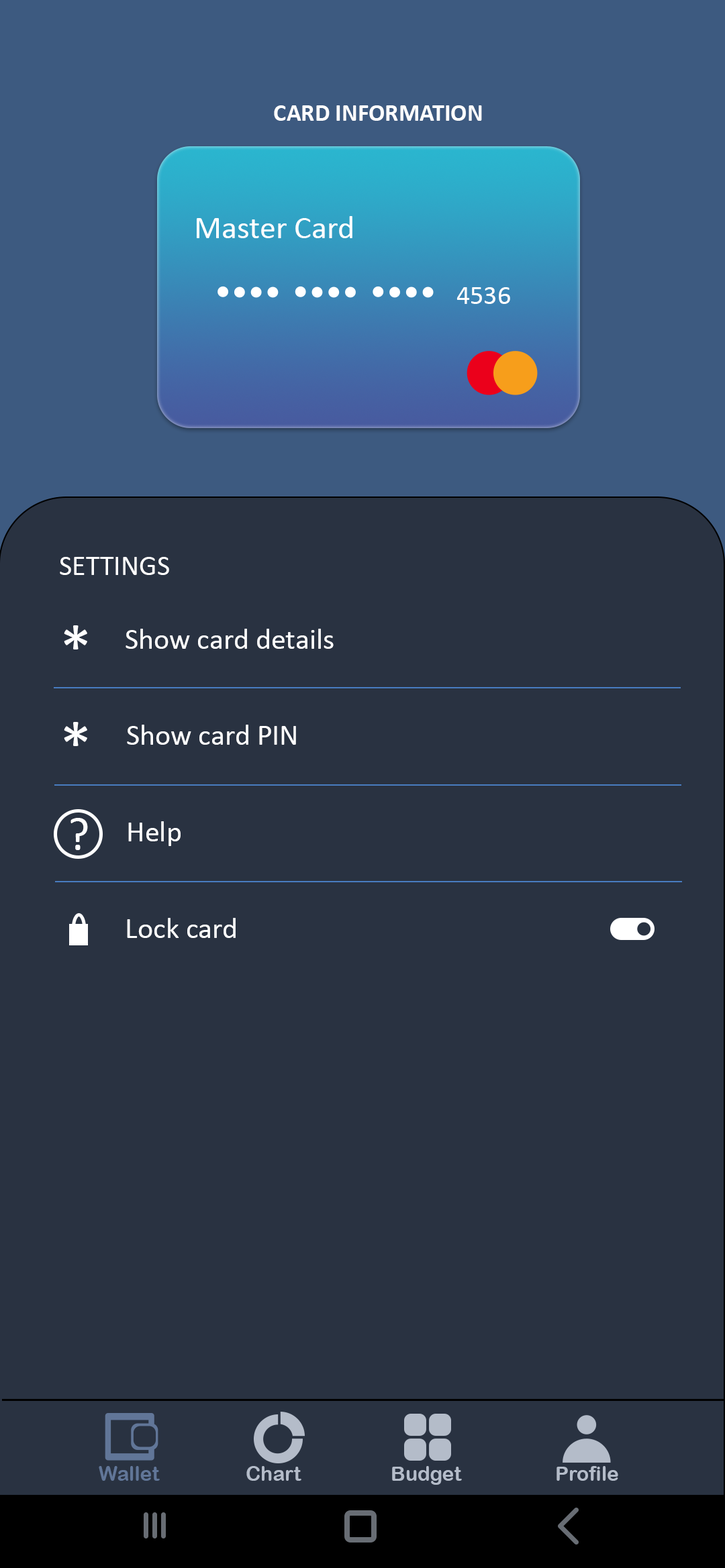
<style>
.page{position:relative;width:725px;height:1568px;background:#293241}
.page>*{position:absolute;margin:0}
.t1{font:24.2px "Calibri-Bold";color:#ffffff}
.t2{font:32.2px "Calibri";color:#ffffff}
.t3{font:26.8px "Calibri";color:#ffffff}
.t4{font:28.2px "Calibri";color:#ffffff}
.t5{font:67.1px "Calibri";color:#ffffff}
.t6{font:29.5px "Calibri";color:#ffffff}
.t7{font:46.8px "Calibri";color:#ffffff}
.t8{font:20.1px "ArialRoundedMTBold";color:#617698}
.t9{font:20.1px "ArialRoundedMTBold";color:#b4bcc9}
</style>
<div class="page">
<p class="t1" style="left:274px;top:105px;width:208px;height:16px">CARD INFORMATION</p>
<p class="t2" style="left:197px;top:216px;width:155px;height:22px">Master Card</p>
<p class="t3" style="left:456px;top:287px;width:54px;height:17px">4536</p>
<p class="t4" style="left:60px;top:557px;width:109px;height:18px">SETTINGS</p>
<p class="t5" style="left:64px;top:625px;width:23px;height:24px">*</p>
<p class="t6" style="left:125px;top:629px;width:208px;height:20px">Show card details</p>
<p class="t5" style="left:64px;top:722px;width:23px;height:24px">*</p>
<p class="t6" style="left:127px;top:725px;width:169px;height:20px">Show card PIN</p>
<p class="t7" style="left:70px;top:818px;width:18px;height:32px">?</p>
<p class="t6" style="left:128px;top:821px;width:52px;height:25px">Help</p>
<p class="t6" style="left:127px;top:918px;width:109px;height:20px">Lock card</p>
<p class="t8" style="left:99px;top:1466px;width:61px;height:15px">Wallet</p>
<p class="t9" style="left:246px;top:1466px;width:55px;height:15px">Chart</p>
<p class="t9" style="left:392px;top:1466px;width:70px;height:19px">Budget</p>
<p class="t9" style="left:556px;top:1466px;width:62px;height:15px">Profile</p>
</div>
